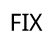
<style>
.page{position:relative;width:53px;height:41px;background:#ffffff}
.page>*{position:absolute;margin:0}
.t1{font:23.7px "DroidSans";color:#000000}
</style>
<div class="page">
<p class="t1" style="left:11px;top:13px;width:32px;height:18px">FIX</p>
</div>
